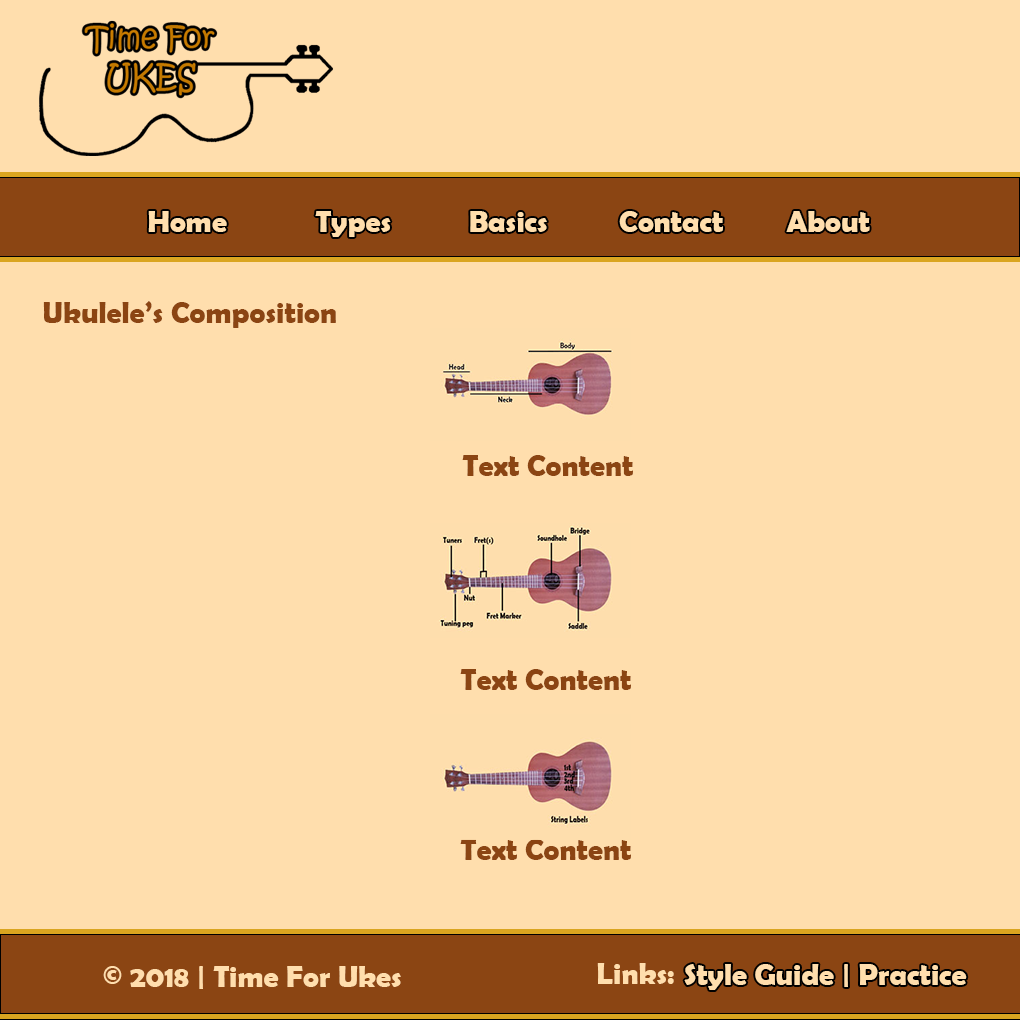
<style>
.page{position:relative;width:1020px;height:1020px;background:#ffdead}
.page>*{position:absolute;margin:0}
.t1{font:30px "BerlinSansFBDemi-Bold";color:#ffdead}
.t2{font:30px "BerlinSansFBDemi-Bold";color:#8b4513}
</style>
<div class="page">
<p class="t1" style="left:148px;top:211px;width:79px;height:21px">Home</p>
<p class="t1" style="left:315px;top:211px;width:76px;height:26px">Types</p>
<p class="t1" style="left:470px;top:211px;width:77px;height:21px">Basics</p>
<p class="t1" style="left:619px;top:211px;width:104px;height:21px">Contact</p>
<p class="t1" style="left:786px;top:211px;width:84px;height:21px">About</p>
<p class="t2" style="left:43px;top:301px;width:293px;height:27px">Ukulele’s Composition</p>
<p class="t2" style="left:462px;top:455px;width:171px;height:21px">Text Content</p>
<p class="t2" style="left:460px;top:669px;width:171px;height:21px">Text Content</p>
<p class="t2" style="left:460px;top:839px;width:171px;height:21px">Text Content</p>
<p class="t1" style="left:103px;top:966px;width:298px;height:23px">© 2018 | Time For Ukes</p>
<p class="t1" style="left:597px;top:963px;width:77px;height:21px">Links:</p>
<p class="t1" style="left:684px;top:964px;width:283px;height:26px">Style Guide | Practice</p>
</div>
